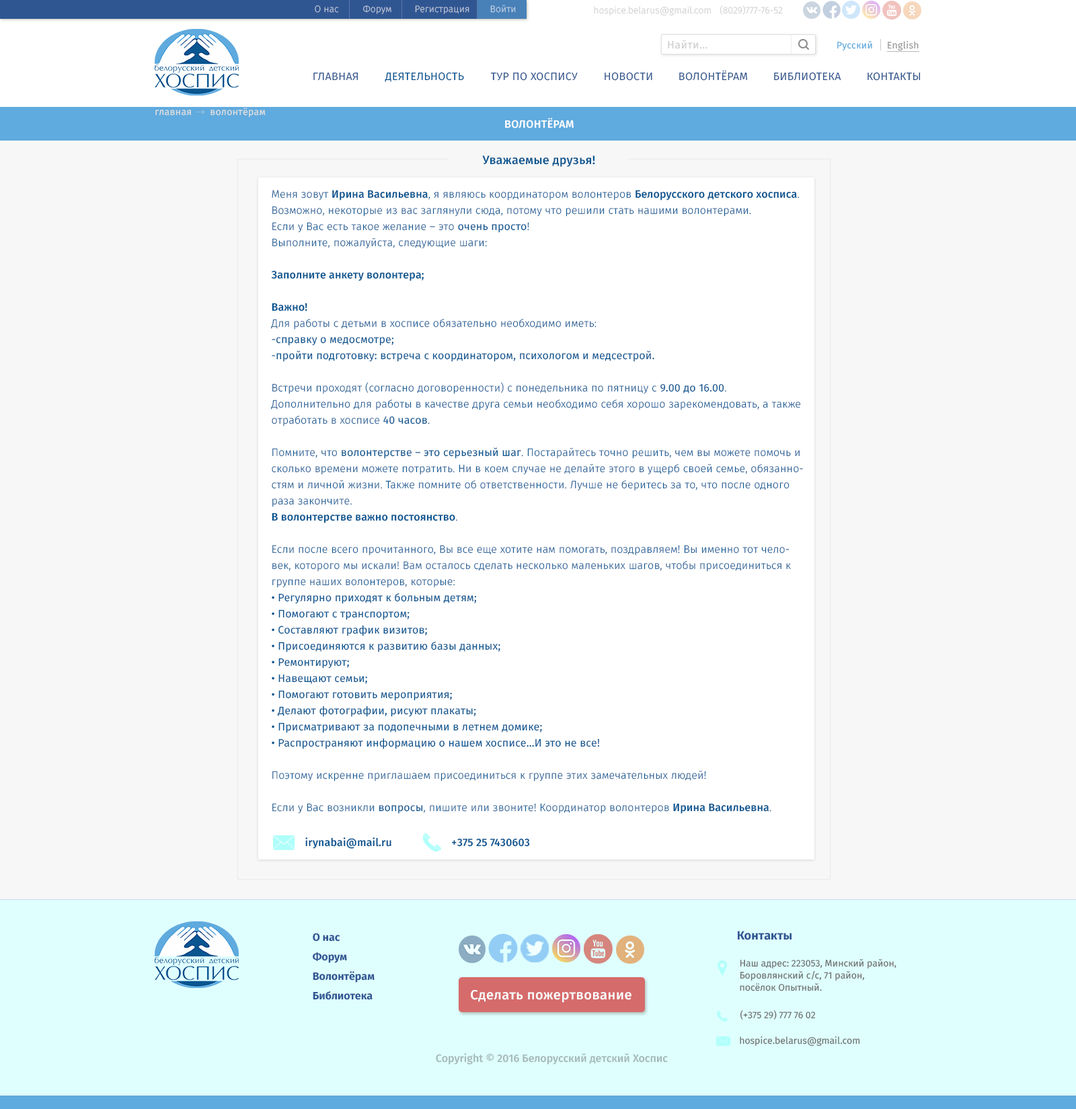
<style>
.page{position:relative;width:1076px;height:1109px;background:#f7f7f7}
.page>*{position:absolute;margin:0}
.t1{font:9.4px "FiraSans-Light"}
.t2{font:9.4px "FiraSans-Light";color:#bcc5d7}
.t3{font:9.4px "FiraSans-Light";color:#c2d1e4}
.t4{font:9.4px "FiraSans-Light";color:#d0d0d0}
.t5{font:10.8px "FiraSans-Regular";letter-spacing:0.025em;color:#cdcdcd}
.t6{font:9.4px "FiraSans-Regular";letter-spacing:0.025em;color:#60aade}
.t7{font:9.4px "FiraSans-Regular";letter-spacing:0.025em;color:#989898;text-decoration:underline}
.t8{font:10.8px "FiraSans-Regular";letter-spacing:0.025em;color:#33578e;text-transform:uppercase}
.t9{font:10.8px "FiraSans-Regular";letter-spacing:0.025em;color:#095691;text-transform:uppercase}
.t10{font:9.4px "FiraSans-Regular";letter-spacing:0.025em;color:#e0dfdf}
.t11{font:10.8px "FiraSans-Medium";letter-spacing:0.025em;color:#ffffff;text-transform:uppercase}
.t12{font:12.1px "FiraSans-Medium";letter-spacing:0.01em;color:#095691}
.t13{font:10.8px/16.1px "FiraSans-Regular";letter-spacing:0.01em;color:#095691}
.t14{font:13.4px/16.1px "FiraSans-Medium";letter-spacing:0.01em;color:#095691}
.t15{font:10.8px/16.1px "FiraSans-Light";letter-spacing:0.01em;color:#095691}
.t16{font:10.8px/16.1px "FiraSans-Medium";letter-spacing:0.01em;color:#095691}
.t17{font:10.8px "FiraSans-Medium";letter-spacing:0.01em;color:#095691}
.t18{font:10.8px "FiraSans-Bold";color:#305692}
.t19{font:12.1px "FiraSans-Bold";color:#305692}
.t20{font:9.4px/12.1px "FiraSans-Regular";color:#727272}
.t21{font:13.4px "FiraSans-Medium";letter-spacing:0.025em;color:#ffffff}
.t22{font:9.4px "FiraSans-Regular";color:#727272}
.t23{font:10.8px "FiraSans-Medium";color:#a6b8b8}
</style>
<div class="page">
<p class="t1" style="left:315px;top:5px;width:24px;height:8px">О нас</p>
<p class="t2" style="left:363px;top:5px;width:28px;height:9px">Форум</p>
<p class="t2" style="left:415px;top:5px;width:54px;height:9px">Регистрация</p>
<p class="t3" style="left:490px;top:5px;width:26px;height:8px">Войти</p>
<p class="t1" style="left:719px;top:5px;width:64px;height:10px">(8029)777-76-52</p>
<p class="t4" style="left:594px;top:6px;width:117px;height:9px">hospice.belarus@gmail.com</p>
<p class="t5" style="left:668px;top:40px;width:39px;height:9px">Найти...</p>
<p class="t6" style="left:837px;top:41px;width:35px;height:10px">Русский</p>
<p class="t7" style="left:886px;top:40px;width:33px;height:12px">English</p>
<p class="t8" style="left:313px;top:72px;width:45px;height:9px">Главная</p>
<p class="t9" style="left:385px;top:72px;width:79px;height:10px">Деятельность</p>
<p class="t8" style="left:490px;top:72px;width:87px;height:9px">тур по хоспису</p>
<p class="t8" style="left:604px;top:72px;width:48px;height:9px">Новости</p>
<p class="t8" style="left:679px;top:70px;width:69px;height:11px">Волонтёрам</p>
<p class="t8" style="left:774px;top:72px;width:67px;height:9px">Библиотека</p>
<p class="t8" style="left:867px;top:72px;width:53px;height:9px">КОнтакты</p>
<p class="t10" style="left:155px;top:110px;width:36px;height:6px">главная</p>
<p class="t10" style="left:210px;top:108px;width:56px;height:10px">волонтёрам</p>
<p class="t11" style="left:505px;top:118px;width:68px;height:10px">Волонтёрам</p>
<p class="t12" style="left:482px;top:155px;width:113px;height:12px">Уважаемые друзья!</p>
<p class="t13" style="left:271px;top:190px;width:532px;height:623px"><span class="t14"><br><br></span><span class="t15">Меня зовут </span><span class="t16">Ирина Васильевна</span><span class="t15">, я являюсь координатором волонтеров </span><span class="t16">Белорусского детского хосписа</span><span class="t15">. <br>Возможно, некоторые из вас заглянули сюда, потому что решили стать нашими волонтерами. <br>Если у Вас есть такое желание – это </span>очень просто<span class="t15">! <br>Выполните, пожалуйста, следующие шаги:<br><br></span><span class="t16">Заполните анкету волонтера;<br><br>Важно!<br></span><span class="t15">Для работы с детьми в хосписе обязательно необходимо иметь:<br></span>-справку о медосмотре;<br>-пройти подготовку: встреча с координатором, психологом и медсестрой.<br><span class="t15"><br>Встречи проходят (согласно договоренности) с понедельника по пятницу с </span>9.00 до 16.00<span class="t15">.<br>Дополнительно для работы в качестве друга семьи необходимо себя хорошо зарекомендовать, а также отработать в хосписе </span>40 часов<span class="t15">.<br><br>Помните, что </span>волонтерстве – это серьезный шаг<span class="t15">. Постарайтесь точно решить, чем вы можете помочь и сколько времени можете потратить. Ни в коем случае не делайте этого в ущерб своей семье, обязанностям и личной жизни. Также помните об ответственности. Лучше не беритесь за то, что после одного раза закончите.<br></span><span class="t16">В волонтерстве важно постоянство</span><span class="t15">.<br><br>Если после всего прочитанного, Вы все еще хотите нам помогать, поздравляем! Вы именно тот человек, которого мы искали! Вам осталось сделать несколько маленьких шагов, чтобы присоединиться к группе наших волонтеров, которые:<br></span>• Регулярно приходят к больным детям;<br>• Помогают с транспортом;<br>• Составляют график визитов;<br>• Присоединяются к развитию базы данных;<br>• Ремонтируют;<br>• Навещают семьи;<br>• Помогают готовить мероприятия;<br>• Делают фотографии, рисуют плакаты;<br>• Присматривают за подопечными в летнем домике;<br>• Распространяют информацию о нашем хосписе...И это не все!<br><span class="t15"><br>Поэтому искренне приглашаем присоединиться к группе этих замечательных людей!<br><br>Если у Вас возникли </span>вопросы<span class="t15">, пишите или звоните! Координатор волонтеров </span><span class="t16">Ирина Васильевна</span><span class="t15">.</span></p>
<p class="t17" style="left:305px;top:837px;width:86px;height:11px">irynabai@mail.ru</p>
<p class="t17" style="left:451px;top:838px;width:79px;height:8px">+375 25 7430603</p>
<p class="t18" style="left:313px;top:932px;width:27px;height:9px">О нас</p>
<p class="t19" style="left:737px;top:930px;width:54px;height:10px">Контакты</p>
<p class="t18" style="left:313px;top:952px;width:34px;height:11px">Форум</p>
<p class="t20" style="left:740px;top:959px;width:156px;height:32px">Наш адрес: 223053, Минский район,<br>Боровлянский с/c, 71 район, <br>посёлок Опытный.</p>
<p class="t18" style="left:313px;top:971px;width:61px;height:11px">Волонтёрам</p>
<p class="t21" style="left:471px;top:990px;width:160px;height:12px">Сделать пожертвование</p>
<p class="t18" style="left:313px;top:991px;width:59px;height:9px">Библиотека</p>
<p class="t22" style="left:740px;top:1010px;width:75px;height:10px">(+375 29) 777 76 02</p>
<p class="t22" style="left:740px;top:1035px;width:120px;height:11px">hospice.belarus@gmail.com</p>
<p class="t23" style="left:436px;top:1053px;width:232px;height:11px">Copyright © 2016 Белорусский детский Хоспис</p>
</div>
